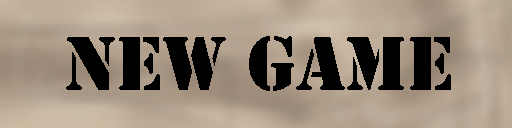
<style>
.page{position:relative;width:512px;height:128px}
.page>*{position:absolute;margin:0}
.t1{font:79.3px "Stencil";color:#000000}
</style>
<div class="page">
<p class="t1" style="left:66px;top:36px;width:385px;height:55px">New Game</p>
</div>
